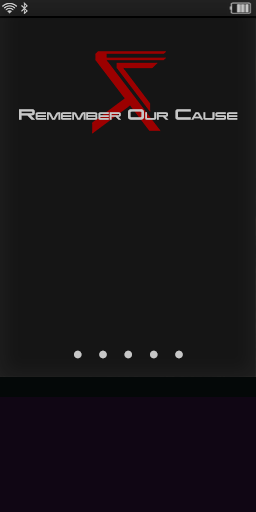
<style>
.page{position:relative;width:256px;height:512px;background:#151515}
.page>*{position:absolute;margin:0}
.t1{font:13.2px "MassEffect123";color:#c7c7c7;font-variant:small-caps}
.t2{font:46px "Consolas";color:#c7c7c7;font-variant:small-caps}
</style>
<div class="page">
<p class="t1" style="left:19px;top:109px;width:219px;height:11px">Remember Our Cause</p>
<p class="t2" style="left:74px;top:350px;width:109px;height:9px">.....</p>
</div>
